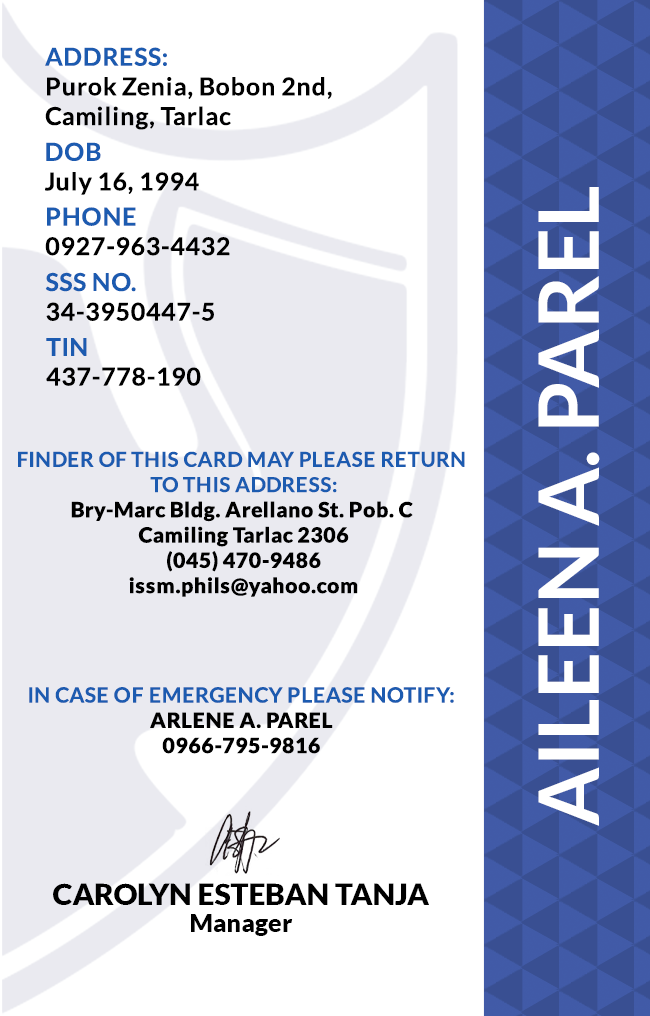
<style>
.page{position:relative;width:650px;height:1016px;background:#ffffff}
.page>*{position:absolute;margin:0}
.t1{font:24.7px/29.6px "Lato-Bold";letter-spacing:0.025em;color:#000000}
.t2{font:24.7px/29.6px "Lato-Bold";letter-spacing:0.025em}
.t3{font:83.3px "Lato-Bold";color:#ffffff}
.t4{font:21.1px "Lato-Black";letter-spacing:0.025em}
.t5{font:20.5px/25.3px "Lato-Bold";letter-spacing:0.025em;text-transform:uppercase}
.t6{font:21.1px/25.3px "Lato-Bold";letter-spacing:0.025em}
.t7{font:29.5px "Lato-Black";color:#000000}
.t8{font:25px "Lato-Black";color:#000000}
</style>
<div class="page">
<p class="t1" style="left:45px;top:47px;width:287px;height:83px">ADDRESS:<br>Purok Zenia, Bobon 2nd,<br>Camiling, Tarlac</p>
<p class="t2" style="left:45px;top:142px;width:154px;height:53px">DOB<br>July 16, 1994</p>
<p class="t3" style="left:538px;top:187px;width:62px;height:639px;rotate:-90deg">AILEEN A. PAREL</p>
<p class="t2" style="left:45px;top:207px;width:185px;height:49px">PHONE <br>0927-963-4432</p>
<p class="t2" style="left:45px;top:272px;width:169px;height:49px">SSS NO.<br>34-3950447-5</p>
<p class="t1" style="left:46px;top:338px;width:155px;height:48px">TIN<br>437-778-190</p>
<p class="t4" style="left:18px;top:451px;width:447px;height:146px;text-align:center"><span class="t5">Finder of this card may please return <br>to this address:<br></span>Bry-Marc Bldg. Arellano St. Pob. C <br>Camiling Tarlac 2306<br>(045) 470-9486<br>issm.phils@yahoo.com</p>
<p class="t6" style="left:29px;top:687px;width:425px;height:67px;text-align:center">IN CASE OF EMERGENCY PLEASE NOTIFY:<br><span class="t4">ARLENE A. PAREL<br>0966-795-9816</span></p>
<p class="t7" style="left:53px;top:883px;width:376px;height:22px">CAROLYN ESTEBAN TANJA</p>
<p class="t8" style="left:191px;top:914px;width:102px;height:22px">Manager</p>
</div>
